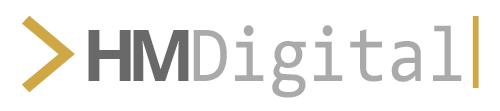
<style>
.page{position:relative;width:500px;height:111px;background:#ffffff}
.page>*{position:absolute;margin:0}
.t1{font:138px "Consolas";color:#d0a745}
.t2{font:72px "Consolas";color:#d0a745}
.t3{font:72px "OpenSans-Bold";color:#696969}
.t4{font:80px "Consolas";color:#aaaaaa;scale:0.9 1}
</style>
<div class="page">
<p class="t1" style="left:22px;top:16px;width:53px;height:76px">&gt;</p>
<p class="t2" style="left:472px;top:16px;width:7px;height:72px">|</p>
<p class="t3" style="left:88px;top:30px;width:43px;height:51px">H</p>
<p class="t3" style="left:133px;top:30px;width:56px;height:51px">M</p>
<p class="t4" style="left:193px;top:25px;width:269px;height:73px">Digital</p>
</div>
